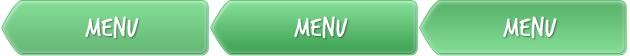
<style>
.page{position:relative;width:630px;height:56px}
.page>*{position:absolute;margin:0}
.t1{font:29.4px "TrashHand";color:#ffffff;text-transform:uppercase}
</style>
<div class="page">
<p class="t1" style="left:85px;top:16px;width:54px;height:23px">menu</p>
<p class="t1" style="left:294px;top:16px;width:54px;height:23px">menu</p>
<p class="t1" style="left:503px;top:16px;width:54px;height:23px">menu</p>
</div>
